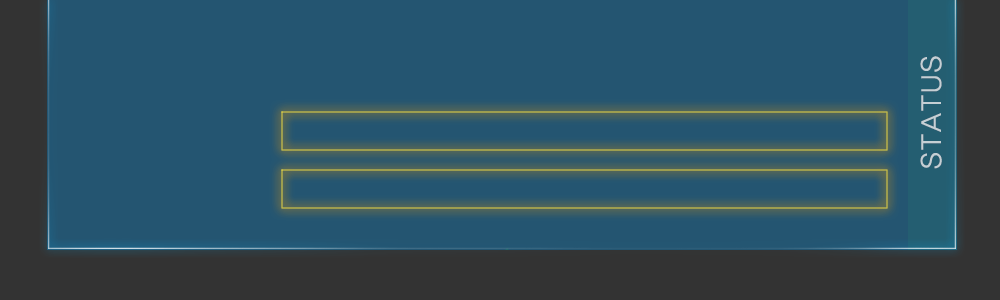
<style>
.page{position:relative;width:1000px;height:300px;background:#245571}
.page>*{position:absolute;margin:0}
.t1{font:27.8px "YDIYGO320";letter-spacing:0.1em;color:#c5cfd4}
</style>
<div class="page">
<p class="t1" style="left:920px;top:56px;width:22px;height:113px;rotate:-90deg">STATUS</p>
</div>
